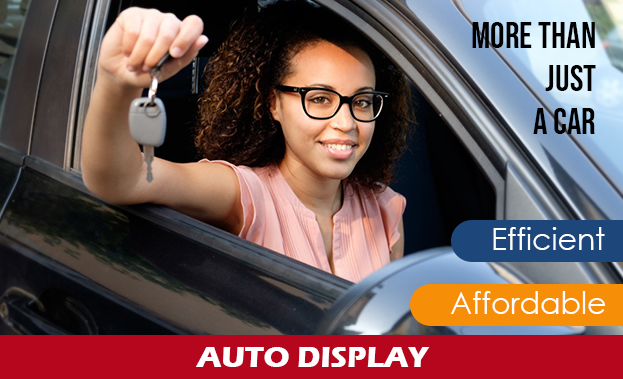
<style>
.page{position:relative;width:623px;height:379px}
.page>*{position:absolute;margin:0}
.t1{font:36px "BebasNeue-Regular";color:#000000}
.t2{font:30px "CenturyGothic";color:#ffffff}
.t3{font:30px "ErasITC-Bold";color:#ffffff}
</style>
<div class="page">
<p class="t1" style="left:472px;top:22px;width:124px;height:112px;text-align:right">More than<br>JUST<br>A CAR</p>
<p class="t2" style="left:493px;top:227px;width:112px;height:23px">Efficient</p>
<p class="t2" style="left:451px;top:291px;width:155px;height:23px">Affordable</p>
<p class="t3" style="left:196px;top:347px;width:234px;height:20px">AUTO DISPLAY</p>
</div>
